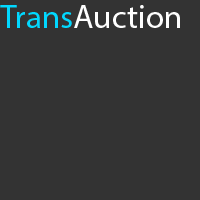
<style>
.page{position:relative;width:200px;height:200px;background:#333333}
.page>*{position:absolute;margin:0}
.t1{font:33.3px "MyriadPro-Regular";color:#01d8ff}
.t2{font:33.3px "MyriadPro-Regular";color:#ffffff}
</style>
<div class="page">
<p class="t1" style="left:0px;top:5px;width:72px;height:23px">Trans</p>
<p class="t2" style="left:74px;top:5px;width:106px;height:23px">Auction</p>
</div>
